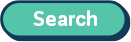
<style>
.page{position:relative;width:131px;height:42px;background:#54c5aa}
.page>*{position:absolute;margin:0}
.t1{font:20.9px "CloudSoft-Bold";color:#ffffff}
</style>
<div class="page">
<p class="t1" style="left:33px;top:10px;width:64px;height:16px">Search</p>
</div>
